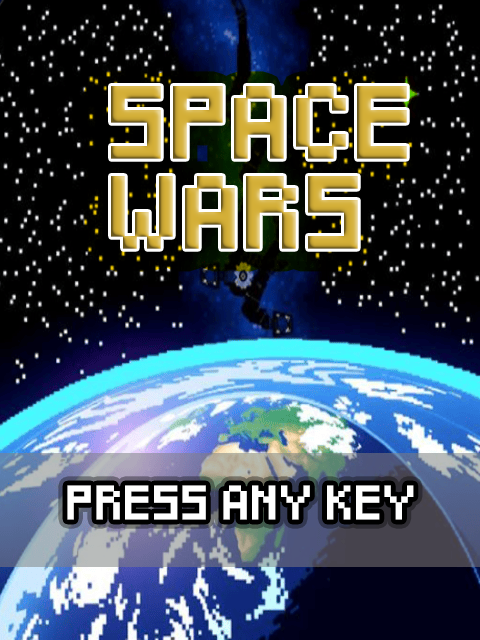
<style>
.page{position:relative;width:480px;height:640px}
.page>*{position:absolute;margin:0}
.t1{font:60px/90px "Pixeled";font-weight:bold}
.t2{font:28px "Pixeled";color:#ffffff;font-weight:bold}
</style>
<div class="page">
<p class="t1" style="left:111px;top:86px;width:296px;height:163px">SPACE <br>WARS</p>
<p class="t2" style="left:67px;top:485px;width:347px;height:35px">PRESS ANY KEY</p>
</div>
